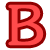
<style>
.page{position:relative;width:50px;height:50px;background:#ffffff}
.page>*{position:absolute;margin:0}
.t1{font:87.8px "JasmineUPC";letter-spacing:-0.01em;color:#ff4b4b;font-weight:bold}
</style>
<div class="page">
<p class="t1" style="left:8px;top:4px;width:36px;height:42px">B</p>
</div>
